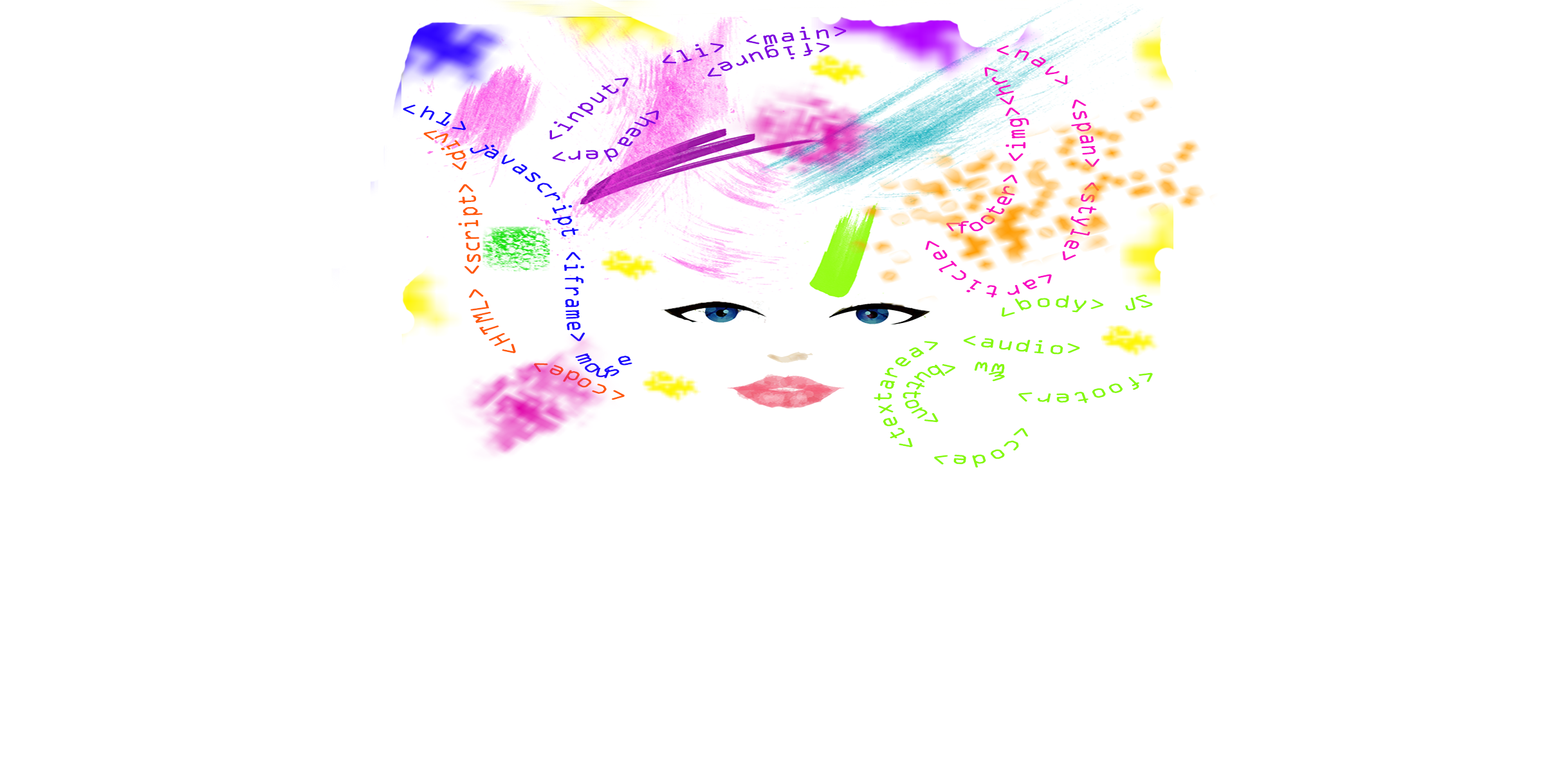
<style>
.page{position:relative;width:1544px;height:772px;background:#ffffff}
.page>*{position:absolute;margin:0}
.t1{font:25.3px "OCRAExtended";color:#7f02df;scale:0.95 1}
.t2{font:19.3px "OCRAExtended";color:#f809c3;scale:1.5 1}
.t3{font:19.3px "OCRAExtended";color:#1706fe;scale:1.5 1}
.t4{font:19.3px "OCRAExtended";color:#fe5806;scale:1.5 1}
.t5{font:19.3px "OCRAExtended";color:#85f809;scale:1.5 1}
</style>
<div class="page">
<p class="t1" style="left:550px;top:26px;width:297px;height:136px;rotate:38deg">&lt;figure&gt;    &lt;header&gt; &lt;input&gt;  &lt;li&gt; &lt;main&gt;</p>
<p class="t2" style="left:925px;top:45px;width:175px;height:253px">&lt;footer&gt; &lt;img&gt;&lt;hr&gt; &lt;nav&gt; &lt;span&gt; &lt;style&gt; &lt;article&gt;<br>&lt;</p>
<p class="t3" style="left:403px;top:104px;width:230px;height:296px"><span class="t4">&lt;code&gt; &lt;HTML&gt; &lt;script&gt; &lt;div&gt;     </span>&lt;h1&gt; javascript &lt;iframe&gt; mouse</p>
<p class="t5" style="left:874px;top:295px;width:279px;height:173px"><span class="t3"> </span>&lt;code&gt; &lt;textarea&gt; &lt;audio&gt;               &lt;body&gt; JS                    &lt;footer&gt; www &lt;button&gt;</p>
</div>
